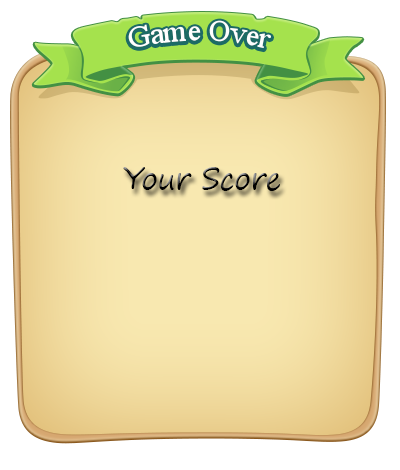
<style>
.page{position:relative;width:400px;height:470px}
.page>*{position:absolute;margin:0}
.t1{font:31.4px "TimesNewRomanPSMT";letter-spacing:-0.02em;color:#ffffff;scale:0.95 1}
.t2{font:30px "SegoePrint";letter-spacing:-0.02em}
</style>
<div class="page">
<p class="t1" style="left:128px;top:20px;width:143px;height:29px">Game Over</p>
<p class="t2" style="left:123px;top:167px;width:157px;height:24px">Your Score</p>
</div>
